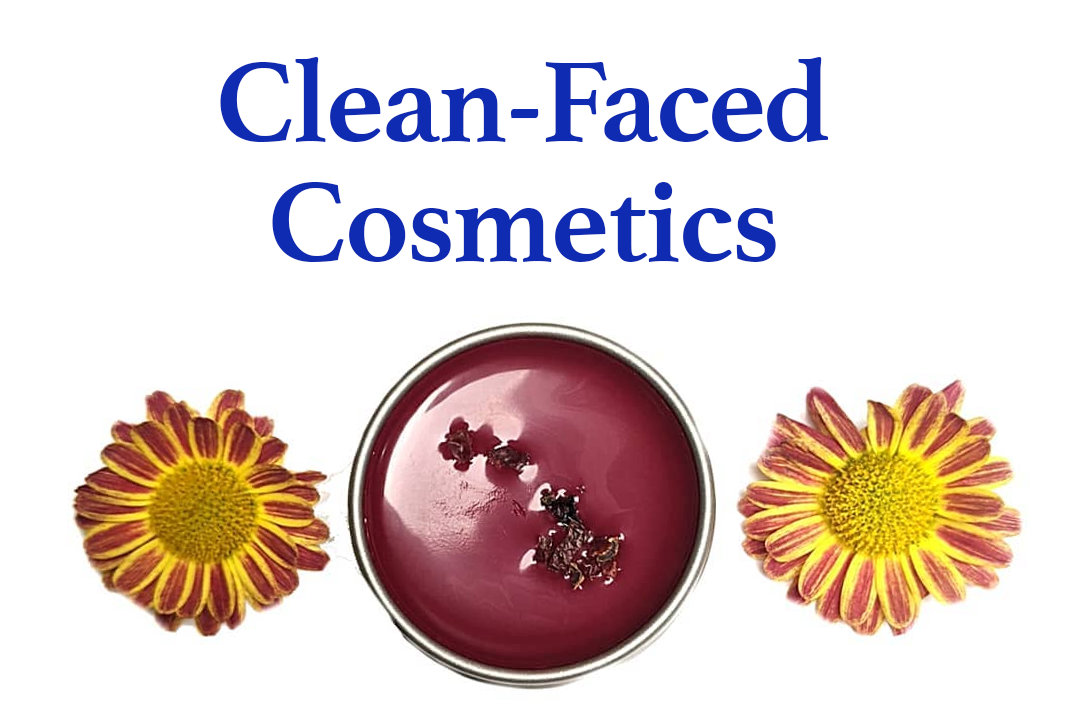
<style>
.page{position:relative;width:1080px;height:720px;background:#ffffff}
.page>*{position:absolute;margin:0}
.t1{font:120px/120px "Athelas-Bold";letter-spacing:-0.02em;color:#0f2bb2}
.t2{font:120px/40px "Athelas-Bold";letter-spacing:-0.02em;color:#0f2bb2}
</style>
<div class="page">
<p class="t1" style="left:220px;top:57px;width:609px;height:205px;text-align:center"><span class="t2">Clean-F</span>aced<br>Cosmetics</p>
</div>
